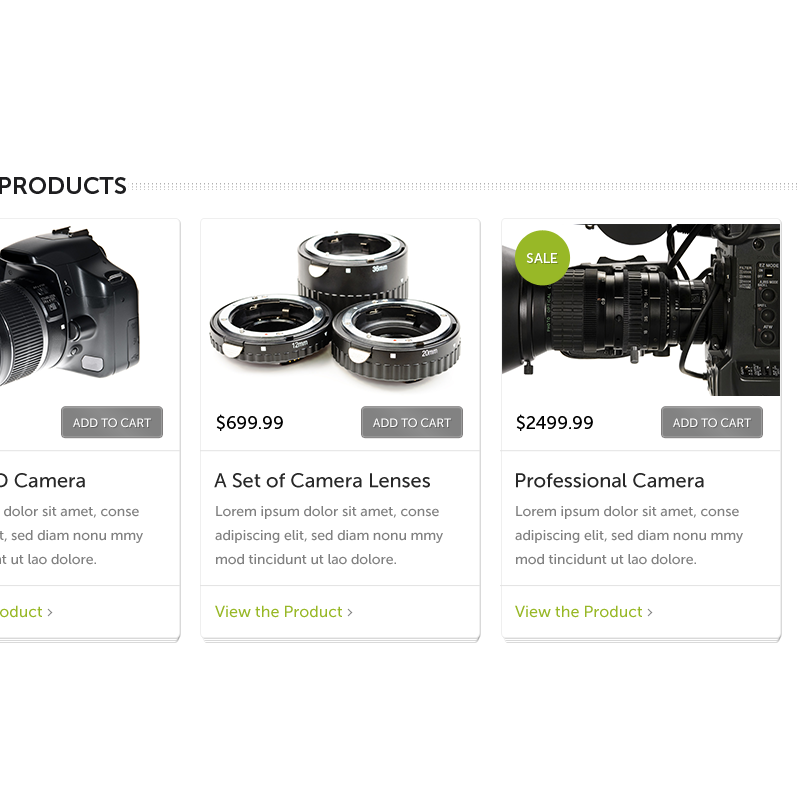
<style>
.page{position:relative;width:800px;height:800px;background:#ffffff}
.page>*{position:absolute;margin:0}
.t1{font:14px "MuseoSans-500";color:#ffffff}
.t2{font:18px "MuseoSans-500";color:#000000}
.t3{font:12px "MuseoSans-500";color:#ffffff}
.t4{font:20px "MuseoSans-500";color:#282828}
.t5{font:14px/24px "MuseoSans-500";color:#808080}
.t6{font:16px "MuseoSans-500";color:#98b827}
</style>
<div class="page">
<p class="t1" style="left:526px;top:253px;width:32px;height:10px">SALE</p>
<p class="t2" style="left:216px;top:414px;width:67px;height:17px">$699.99</p>
<p class="t2" style="left:516px;top:414px;width:77px;height:17px">$2499.99</p>
<p class="t3" style="left:73px;top:418px;width:78px;height:10px">ADD TO CART</p>
<p class="t3" style="left:373px;top:418px;width:78px;height:10px">ADD TO CART</p>
<p class="t3" style="left:673px;top:418px;width:78px;height:10px">ADD TO CART</p>
<p class="t4" style="left:214px;top:473px;width:216px;height:15px">A Set of Camera Lenses</p>
<p class="t4" style="left:516px;top:473px;width:188px;height:15px">Professional Camera</p>
<p class="t5" style="left:215px;top:506px;width:228px;height:59px">Lorem ipsum dolor sit amet, conse  <br>adipiscing elit, sed diam nonu mmy  <br>mod tincidunt ut lao dolore.</p>
<p class="t5" style="left:515px;top:506px;width:228px;height:59px">Lorem ipsum dolor sit amet, conse  <br>adipiscing elit, sed diam nonu mmy  <br>mod tincidunt ut lao dolore.</p>
<p class="t6" style="left:215px;top:605px;width:127px;height:13px">View the Product</p>
<p class="t6" style="left:515px;top:605px;width:127px;height:13px">View the Product</p>
</div>
